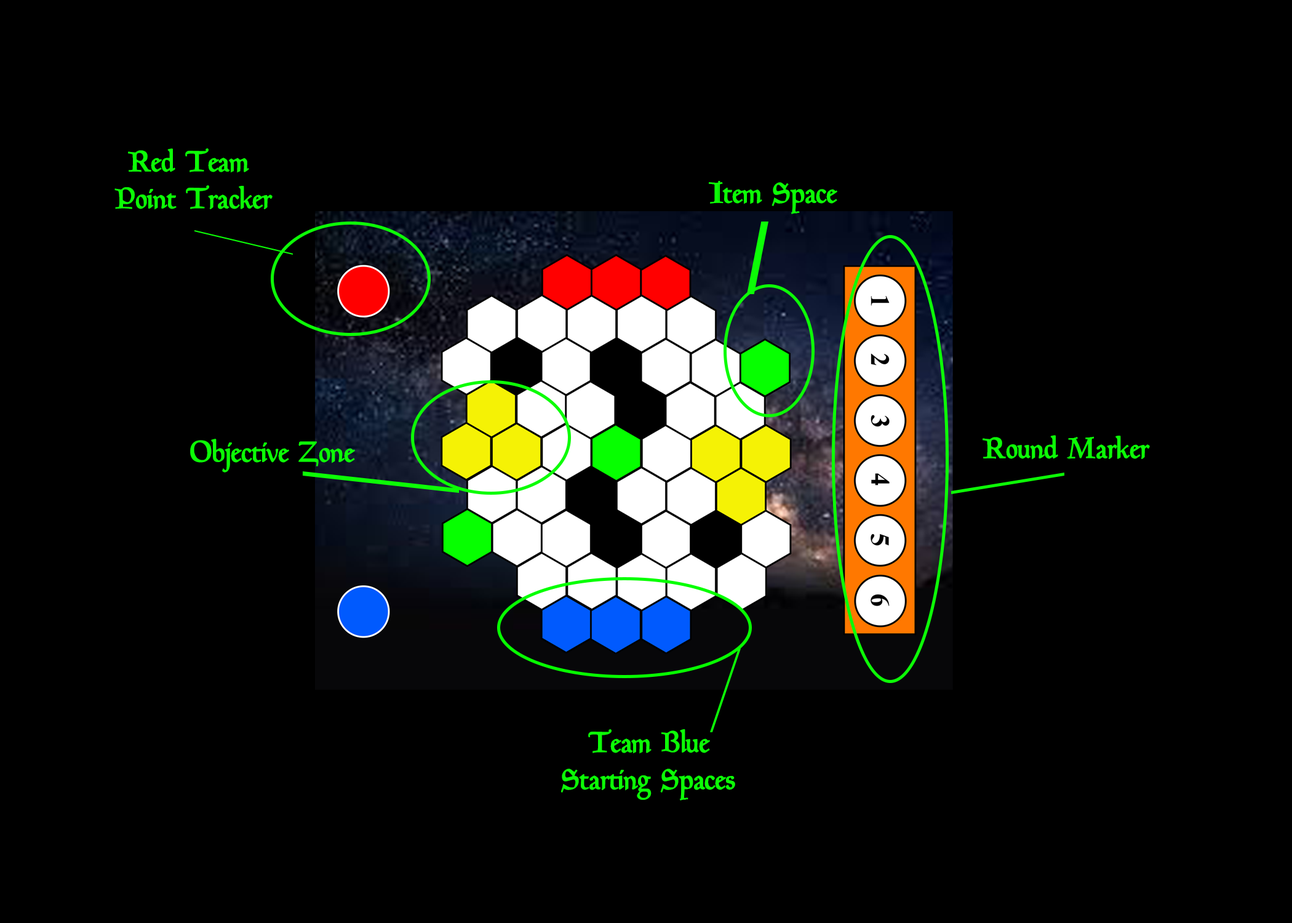
<style>
.page{position:relative;width:1292px;height:923px;background:#000000}
.page>*{position:absolute;margin:0}
.t1{font:30.8px "GoudyMediaeval-DemiBold";color:#0cfd06}
</style>
<div class="page">
<p class="t1" style="left:114px;top:148px;width:159px;height:62px;text-align:center">Red Team <br>Point Tracker</p>
<p class="t1" style="left:709px;top:181px;width:128px;height:33px">Item Space</p>
<p class="t1" style="left:983px;top:435px;width:167px;height:25px">Round Marker</p>
<p class="t1" style="left:190px;top:439px;width:165px;height:34px">Objective Zone</p>
<p class="t1" style="left:561px;top:729px;width:174px;height:71px;text-align:center">Team Blue<br>Starting Spaces</p>
</div>
